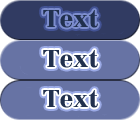
<style>
.page{position:relative;width:140px;height:120px;background:#6773a4}
.page>*{position:absolute;margin:0}
.t1{font:36px "TFPimpakarnExtra";color:#21304e}
</style>
<div class="page">
<p class="t1" style="left:43px;top:10px;width:55px;height:18px">Text</p>
<p class="t1" style="left:43px;top:10px;width:55px;height:18px">Text</p>
<p class="t1" style="left:43px;top:50px;width:55px;height:18px">Text</p>
<p class="t1" style="left:43px;top:50px;width:55px;height:18px">Text</p>
<p class="t1" style="left:43px;top:90px;width:55px;height:18px">Text</p>
<p class="t1" style="left:43px;top:90px;width:55px;height:18px">Text</p>
</div>
